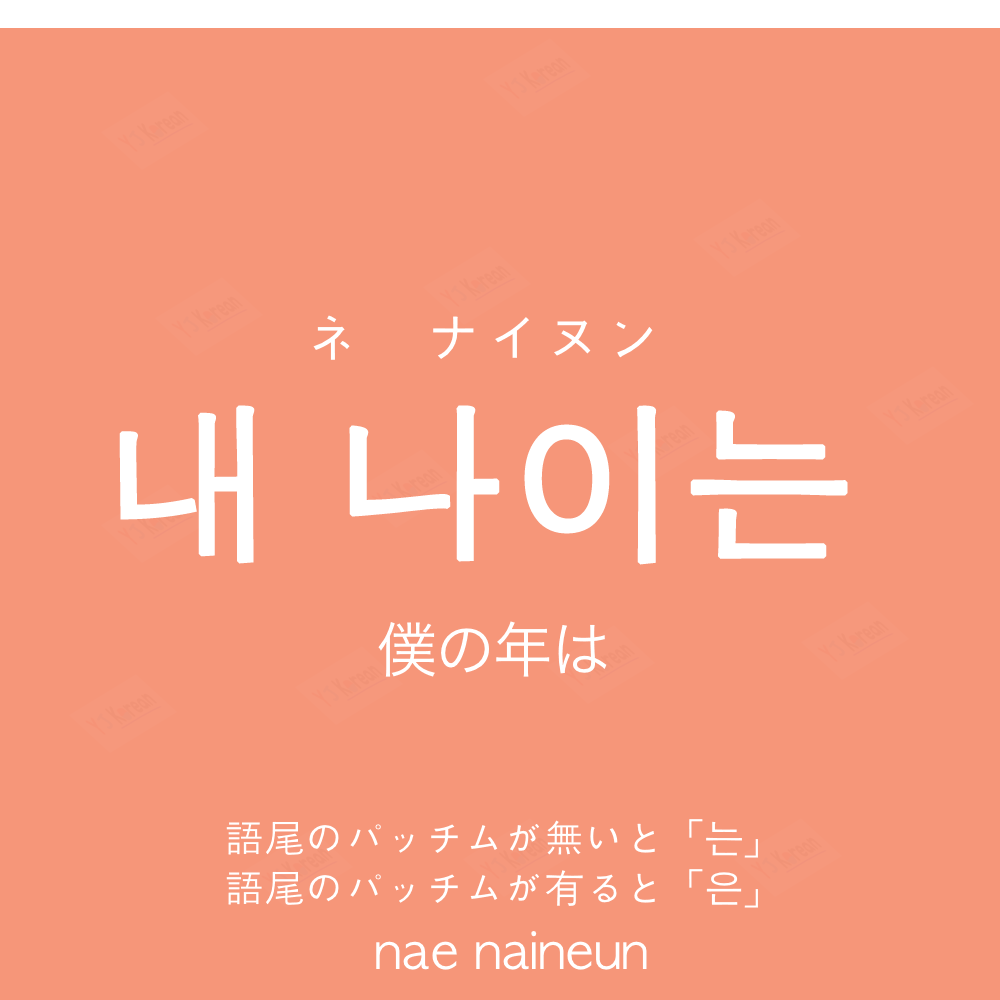
<style>
.page{position:relative;width:1000px;height:1000px;background:#f69679}
.page>*{position:absolute;margin:0}
.t1{font:60px "AppleGothic";color:#ffffff}
.t2{font:170px "AppleGothic";color:#ffffff;font-weight:bold}
.t3{font:60px "HiraKakuProN-W3";color:#ffffff}
.t4{font:40px "AppleGothic";color:#ffffff}
.t5{font:50px "AppleGothic";color:#ffffff}
</style>
<div class="page">
<p class="t1" style="left:313px;top:315px;width:340px;height:45px">ネ　ナイヌン</p>
<p class="t2" style="left:119px;top:405px;width:729px;height:160px">내 나이는</p>
<p class="t3" style="left:378px;top:621px;width:229px;height:56px">僕の年は</p>
<p class="t4" style="left:226px;top:819px;width:532px;height:39px">語尾のパッチムが無いと「는」</p>
<p class="t4" style="left:226px;top:869px;width:532px;height:39px">語尾のパッチムが有ると「은」</p>
<p class="t5" style="left:376px;top:931px;width:271px;height:39px">nae naineun</p>
</div>
